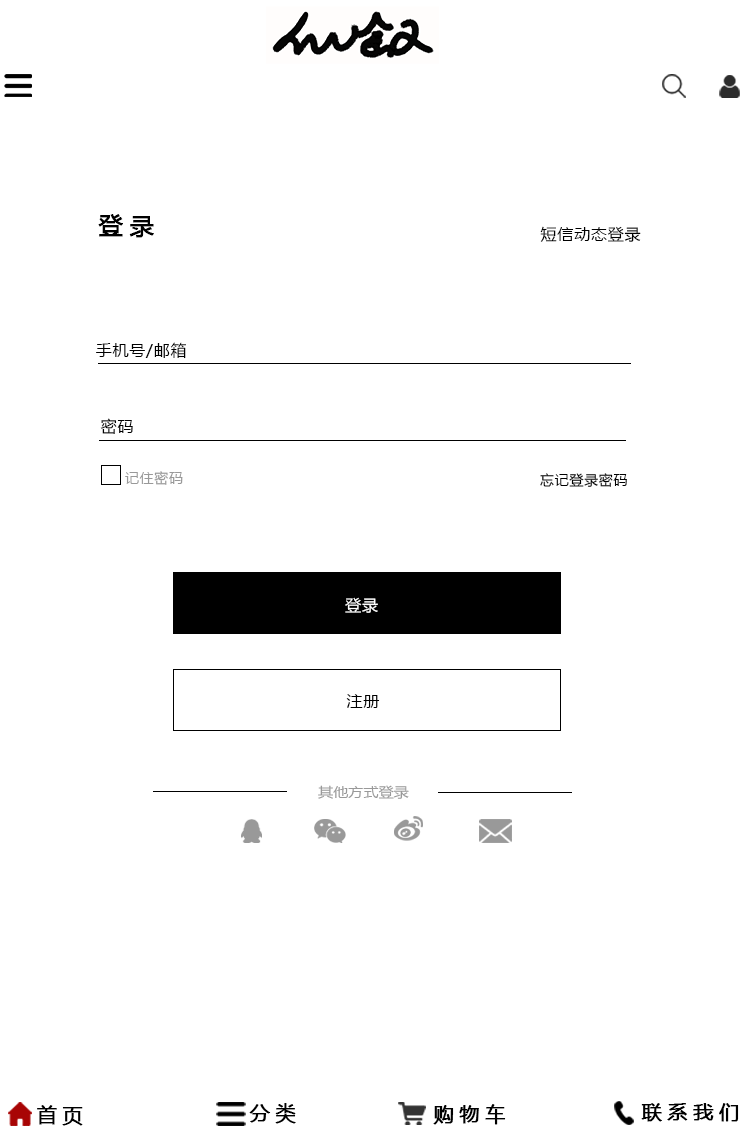
<style>
.page{position:relative;width:750px;height:1134px;background:#ffffff}
.page>*{position:absolute;margin:0}
.t1{font:24px "MicrosoftYaHei";letter-spacing:0.26em;color:#000000;font-weight:bold}
.t2{font:16px "MicrosoftYaHei";letter-spacing:0.05em;color:#000000}
.t3{font:14px "MicrosoftYaHei";letter-spacing:0.05em;color:#999999}
.t4{font:14px "MicrosoftYaHei";letter-spacing:0.05em;color:#000000}
.t5{font:16px "MicrosoftYaHei";letter-spacing:0.05em;color:#ffffff}
.t6{font:14px "MicrosoftYaHei";color:#999999;scale:1.08 1}
.t7{font:20px "MicrosoftYaHei";letter-spacing:0.26em;color:#000000;font-weight:bold}
</style>
<div class="page">
<p class="t1" style="left:98px;top:214px;width:56px;height:24px">登录</p>
<p class="t2" style="left:540px;top:226px;width:101px;height:16px">短信动态登录</p>
<p class="t2" style="left:96px;top:342px;width:90px;height:17px">手机号/邮箱</p>
<p class="t2" style="left:100px;top:418px;width:33px;height:16px">密码</p>
<p class="t3" style="left:125px;top:471px;width:58px;height:14px">记住密码</p>
<p class="t4" style="left:540px;top:473px;width:87px;height:14px">忘记登录密码</p>
<p class="t5" style="left:345px;top:597px;width:33px;height:16px">登录</p>
<p class="t2" style="left:346px;top:694px;width:34px;height:14px">注册</p>
<p class="t6" style="left:318px;top:785px;width:91px;height:14px">其他方式登录</p>
<p class="t7" style="left:37px;top:1105px;width:46px;height:21px">首页</p>
<p class="t7" style="left:249px;top:1103px;width:47px;height:21px">分类</p>
<p class="t7" style="left:433px;top:1104px;width:73px;height:21px">购物车</p>
<p class="t7" style="left:641px;top:1103px;width:98px;height:19px">联系我们</p>
</div>
